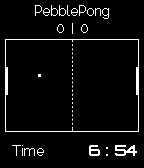
<style>
.page{position:relative;width:144px;height:168px;background:#000000}
.page>*{position:absolute;margin:0}
.t1{font:15px "Raleway-Thin";letter-spacing:-0.02em;color:#ffffff}
.t2{font:15px "Orbitron-Bold";letter-spacing:-0.02em;color:#ffffff}
</style>
<div class="page">
<p class="t1" style="left:35px;top:5px;width:74px;height:14px">PebblePong</p>
<p class="t1" style="left:57px;top:24px;width:7px;height:9px">0</p>
<p class="t1" style="left:81px;top:24px;width:7px;height:9px">0</p>
<p class="t1" style="left:12px;top:145px;width:32px;height:11px">Time</p>
<p class="t2" style="left:89px;top:145px;width:48px;height:11px">6 : 54</p>
</div>
